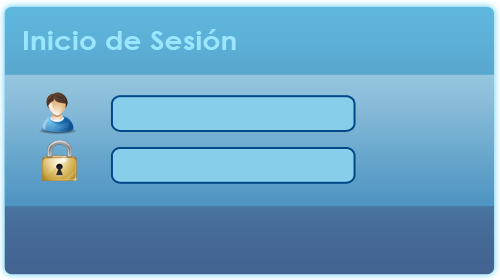
<style>
.page{position:relative;width:500px;height:280px}
.page>*{position:absolute;margin:0}
.t1{font:27px "CenturyGothic-Bold";color:#9ae6ff;scale:1.05 1}
</style>
<div class="page">
<p class="t1" style="left:24px;top:29px;width:212px;height:21px">Inicio de Sesión</p>
</div>
